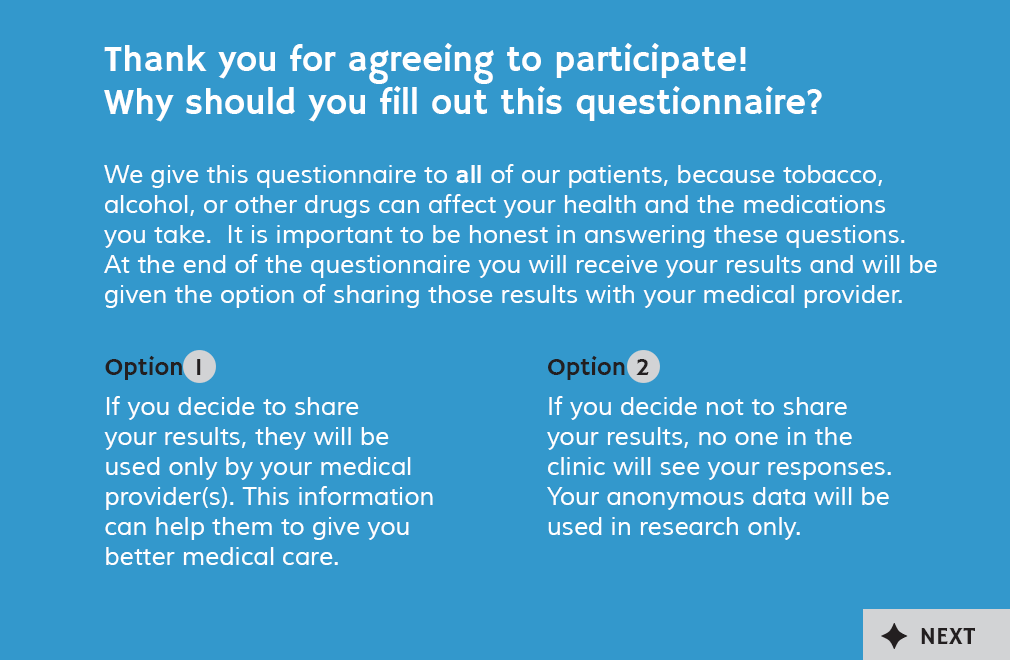
<style>
.page{position:relative;width:1010px;height:660px;background:#3398cc}
.page>*{position:absolute;margin:0}
.t1{font:36px "HammersmithOne-Regular";color:#ffffff}
.t2{font:25px "Muli";color:#ffffff}
.t3{font:25px "HammersmithOne-Regular";color:#ffffff}
.t4{font:25px "HammersmithOne-Regular";color:#231f20}
</style>
<div class="page">
<p class="t1" style="left:104px;top:43px;width:718px;height:79px">Thank you for agreeing to participate!  <br>Why should you fill out this questionnaire?</p>
<p class="t2" style="left:104px;top:164px;width:833px;height:144px">We give this questionnaire to <span class="t3">all </span>of our patients, because tobacco, alcohol, or other drugs can affect your health and the medications <br>you take.  It is important to be honest in answering these questions.  <br>At the end of the questionnaire you will receive your results and will be given the option of sharing those results with your medical provider.</p>
<p class="t2" style="left:104px;top:355px;width:329px;height:210px"><span class="t4">Option 1<br></span>If you decide to share <br>your results, they will be used only by your medical provider(s). This information can help them to give you better medical care.</p>
<p class="t2" style="left:547px;top:355px;width:344px;height:185px"><span class="t4">Option 2<br></span>If you decide not to share <br>your results, no one in the <br>clinic will see your responses.  Your anonymous data will be used in research only.</p>
<p class="t4" style="left:921px;top:627px;width:54px;height:17px">NEXT</p>
</div>
